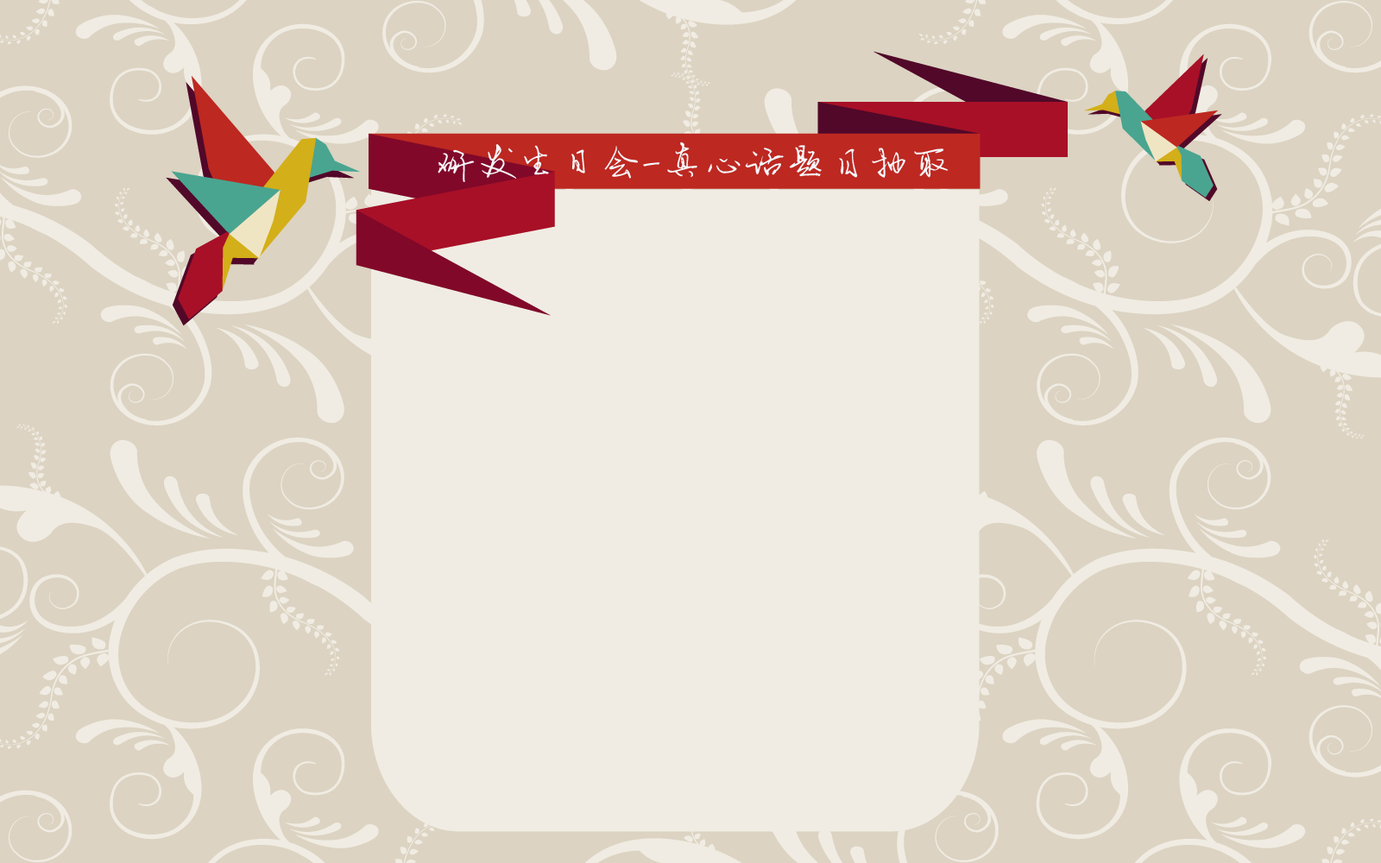
<style>
.page{position:relative;width:1381px;height:863px;background:#dcd3c2}
.page>*{position:absolute;margin:0}
.t1{font:41.4px "--";color:#f5f8fb}
</style>
<div class="page">
<p class="t1" style="left:438px;top:142px;width:511px;height:40px">研发生日会-真心话题目抽取</p>
</div>
